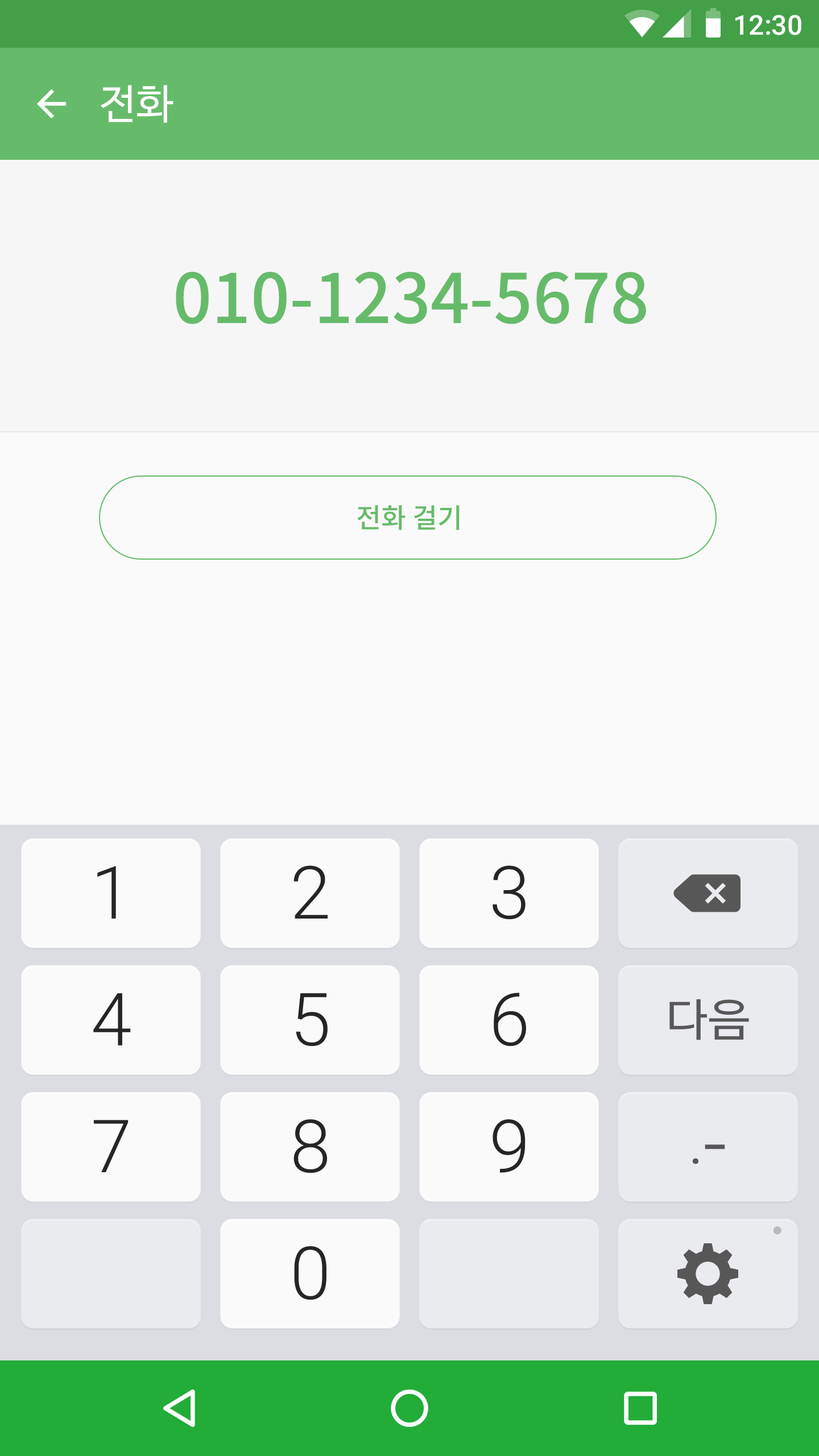
<style>
.page{position:relative;width:819px;height:1456px;background:#fafafa}
.page>*{position:absolute;margin:0}
.t1{font:27.3px "Roboto-Medium";color:#ffffff}
.t2{font:40.9px "NanumBarunGothic";color:#ffffff}
.t3{font:68.2px "NotoSansCJKkr-Medium";color:#66bb6a}
.t4{font:27.3px "NotoSansCJKkr-Medium";color:#66bb6a}
</style>
<div class="page">
<p class="t1" style="left:735px;top:15px;width:66px;height:20px">12:30</p>
<p class="t2" style="left:101px;top:85px;width:72px;height:38px">전화</p>
<p class="t3" style="left:176px;top:271px;width:470px;height:53px">010-1234-5678</p>
<p class="t4" style="left:357px;top:505px;width:103px;height:25px">전화 걸기</p>
</div>
